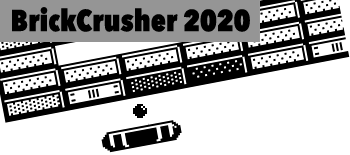
<style>
.page{position:relative;width:350px;height:155px;background:#ffffff}
.page>*{position:absolute;margin:0}
.t1{font:30px "AvenirNextCondensed-Heavy";color:#000000}
</style>
<div class="page">
<p class="t1" style="left:12px;top:7px;width:238px;height:25px">BrickCrusher 2020</p>
</div>
